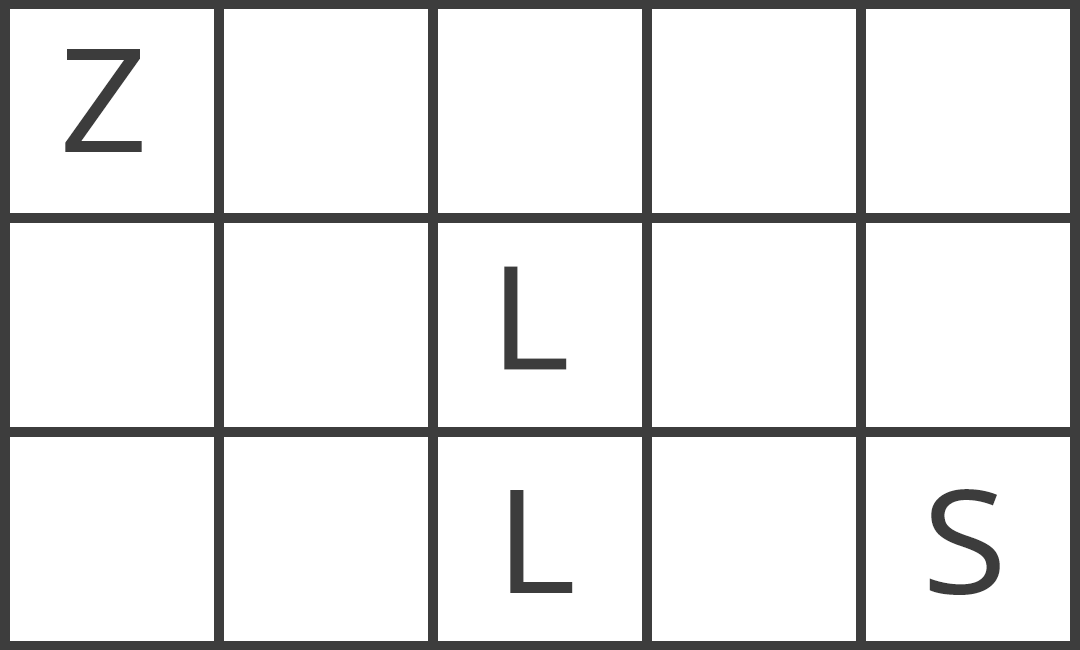
<style>
.page{position:relative;width:1080px;height:650px;background:#ffffff}
.page>*{position:absolute;margin:0}
.t1{font:144px "OpenSans-Regular";letter-spacing:0.06em;color:#3c3c3c;scale:1.08 1}
</style>
<div class="page">
<p class="t1" style="left:65px;top:49px;width:77px;height:103px">Z</p>
<p class="t1" style="left:504px;top:266px;width:63px;height:104px">L</p>
<p class="t1" style="left:510px;top:490px;width:63px;height:103px">L</p>
<p class="t1" style="left:929px;top:489px;width:71px;height:106px">S</p>
</div>
